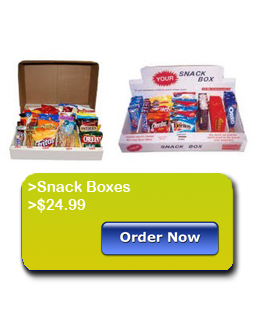
<style>
.page{position:relative;width:254px;height:327px;background:#ffffff}
.page>*{position:absolute;margin:0}
.t1{font:15px "ArialRoundedMTBold";color:#ffffff}
</style>
<div class="page">
<p class="t1" style="left:28px;top:181px;width:103px;height:32px">&gt;Snack Boxes<br>&gt;$24.99</p>
</div>
